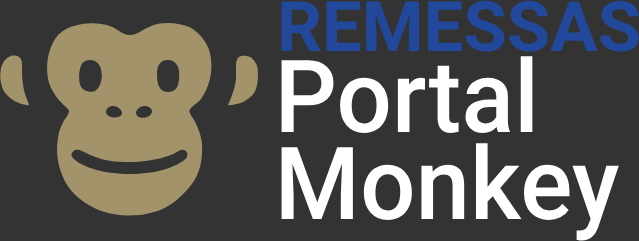
<style>
.page{position:relative;width:639px;height:241px;background:#333333}
.page>*{position:absolute;margin:0}
.t1{font:69.6px "Roboto-Bold";color:#21489b}
.t2{font:100.9px/87px "Roboto-Medium";color:#ffffff;scale:0.97 1}
</style>
<div class="page">
<p class="t1" style="left:281px;top:0px;width:358px;height:52px">REMESSAS</p>
<p class="t2" style="left:281px;top:56px;width:338px;height:185px">Portal<br>Monkey</p>
</div>
